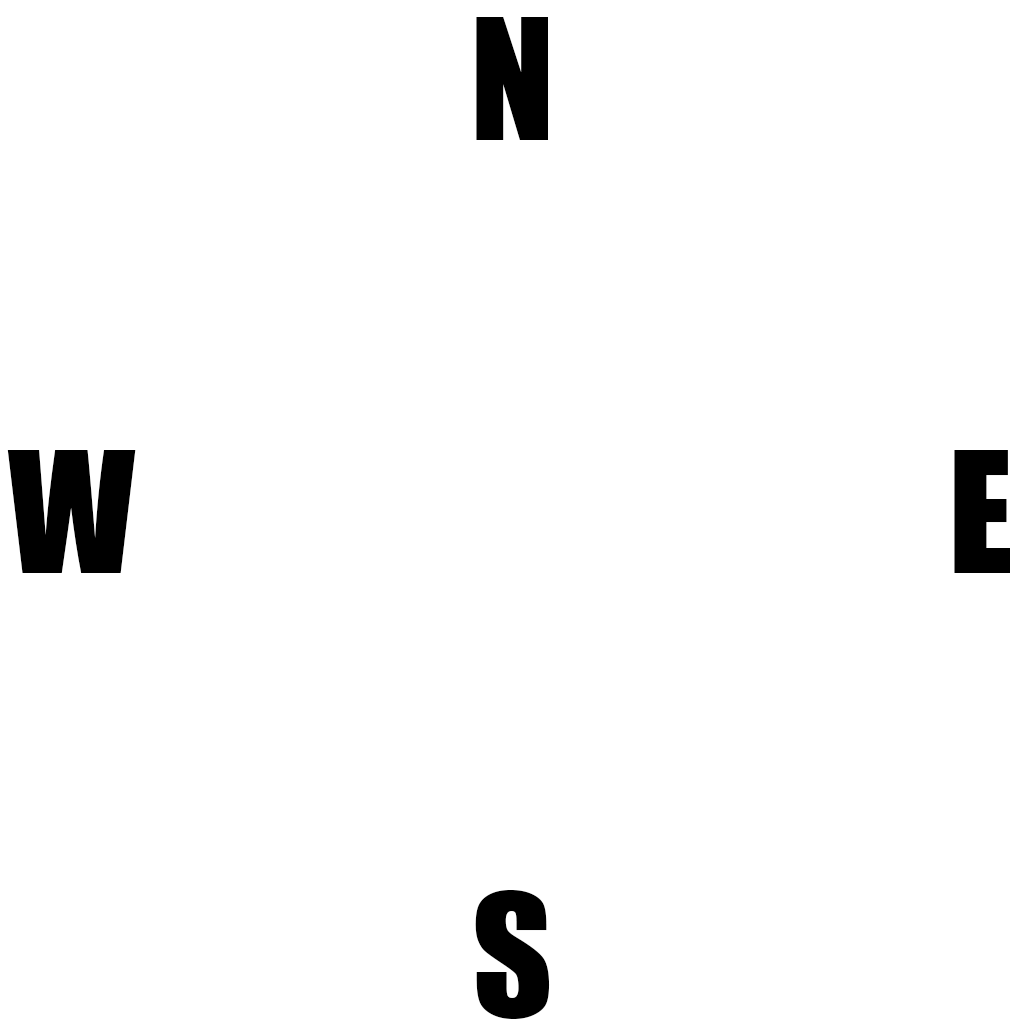
<style>
.page{position:relative;width:1024px;height:1024px;background:#ffffff}
.page>*{position:absolute;margin:0}
.t1{font:156.2px "Impact";color:#000000}
</style>
<div class="page">
<p class="t1" style="left:476px;top:17px;width:72px;height:123px">N</p>
<p class="t1" style="left:7px;top:450px;width:129px;height:123px">W</p>
<p class="t1" style="left:954px;top:450px;width:56px;height:123px">E</p>
<p class="t1" style="left:475px;top:890px;width:75px;height:129px">S</p>
</div>
